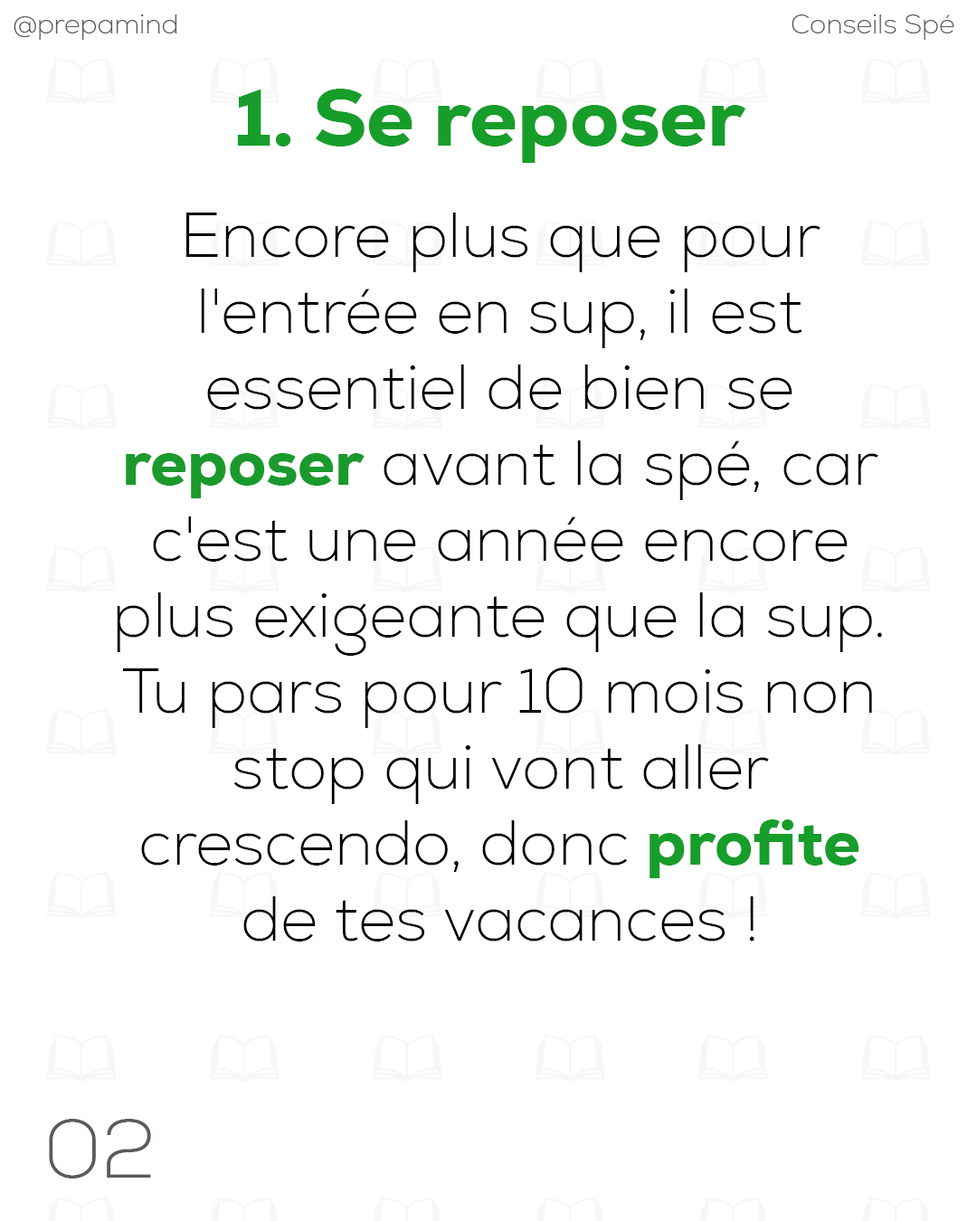
<style>
.page{position:relative;width:977px;height:1221px;background:#ffffff}
.page>*{position:absolute;margin:0}
.t1{font:27.1px "Nexa-ExtraLight";color:#5e5a5a}
.t2{font:81.2px "Nexa-Heavy";color:#179d2a}
.t3{font:63.3px "Nexa-ExtraLight";color:#000000}
.t4{font:63.3px "Nexa-Heavy";color:#1a9a2c}
.t5{font:63.3px "Nexa-Heavy";color:#179d2a}
.t6{font:81.7px "Nexa-ExtraLight";color:#5e5a5a}
</style>
<div class="page">
<p class="t1" style="left:14px;top:14px;width:163px;height:26px">@prepamind</p>
<p class="t1" style="left:791px;top:14px;width:163px;height:26px">Conseils Spé</p>
<p class="t2" style="left:237px;top:89px;width:509px;height:74px">1. Se reposer</p>
<p class="t3" style="left:117px;top:213px;width:765px;height:728px;text-align:center">Encore plus que pour l'entrée en sup, il est essentiel de bien se <span class="t4">reposer</span> avant la spé, car c'est une année encore plus exigeante que la sup. Tu pars pour 10 mois non stop qui vont aller crescendo, donc <span class="t5">profite</span> de tes vacances !</p>
<p class="t6" style="left:49px;top:1119px;width:102px;height:59px">02</p>
</div>
